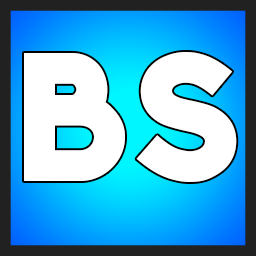
<style>
.page{position:relative;width:256px;height:256px;background:#ffffff}
.page>*{position:absolute;margin:0}
.t1{font:180px "Biko-Black";color:#ffffff}
</style>
<div class="page">
<p class="t1" style="left:24px;top:52px;width:213px;height:130px">BS</p>
</div>
